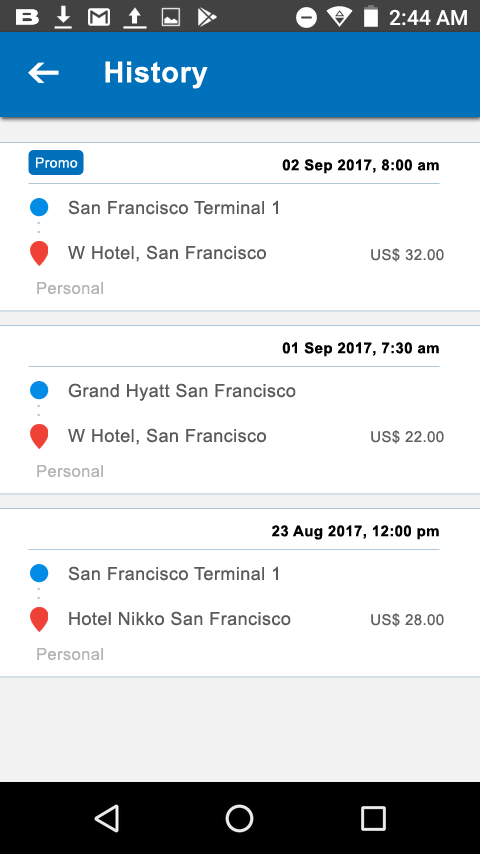
<style>
.page{position:relative;width:480px;height:854px;background:#ffffff}
.page>*{position:absolute;margin:0}
.t1{font:29px "Arial-BoldMT";letter-spacing:0.025em;color:#ffffff}
.t2{font:14px "ArialMT";letter-spacing:0.025em;color:#ffffff}
.t3{font:15px "Arial-BoldMT";letter-spacing:0.025em;color:#010101}
.t4{font:18px/45px "ArialMT";letter-spacing:0.025em;color:#5a5a5a}
.t5{font:15px "ArialMT";letter-spacing:0.025em;color:#606060}
.t6{font:16.5px "ArialMT";letter-spacing:0.025em;color:#b5b3b3}
</style>
<div class="page">
<p class="t1" style="left:105px;top:61px;width:103px;height:28px">History</p>
<p class="t2" style="left:36px;top:157px;width:42px;height:11px">Promo</p>
<p class="t3" style="left:282px;top:159px;width:157px;height:15px">02 Sep 2017, 8:00 am</p>
<p class="t4" style="left:68px;top:200px;width:210px;height:62px">San Francisco Terminal 1<br>W Hotel, San Francisco</p>
<p class="t5" style="left:371px;top:248px;width:73px;height:14px">US$ 32.00</p>
<p class="t6" style="left:37px;top:282px;width:66px;height:13px">Personal</p>
<p class="t3" style="left:282px;top:342px;width:157px;height:15px">01 Sep 2017, 7:30 am</p>
<p class="t4" style="left:68px;top:383px;width:228px;height:62px">Grand Hyatt San Francisco<br>W Hotel, San Francisco</p>
<p class="t5" style="left:371px;top:430px;width:73px;height:14px">US$ 22.00</p>
<p class="t6" style="left:37px;top:465px;width:66px;height:13px">Personal</p>
<p class="t3" style="left:272px;top:525px;width:167px;height:15px">23 Aug 2017, 12:00 pm</p>
<p class="t4" style="left:68px;top:566px;width:223px;height:60px">San Francisco Terminal 1<br>Hotel Nikko San Francisco</p>
<p class="t5" style="left:371px;top:613px;width:73px;height:14px">US$ 28.00</p>
<p class="t6" style="left:37px;top:648px;width:66px;height:13px">Personal</p>
</div>
